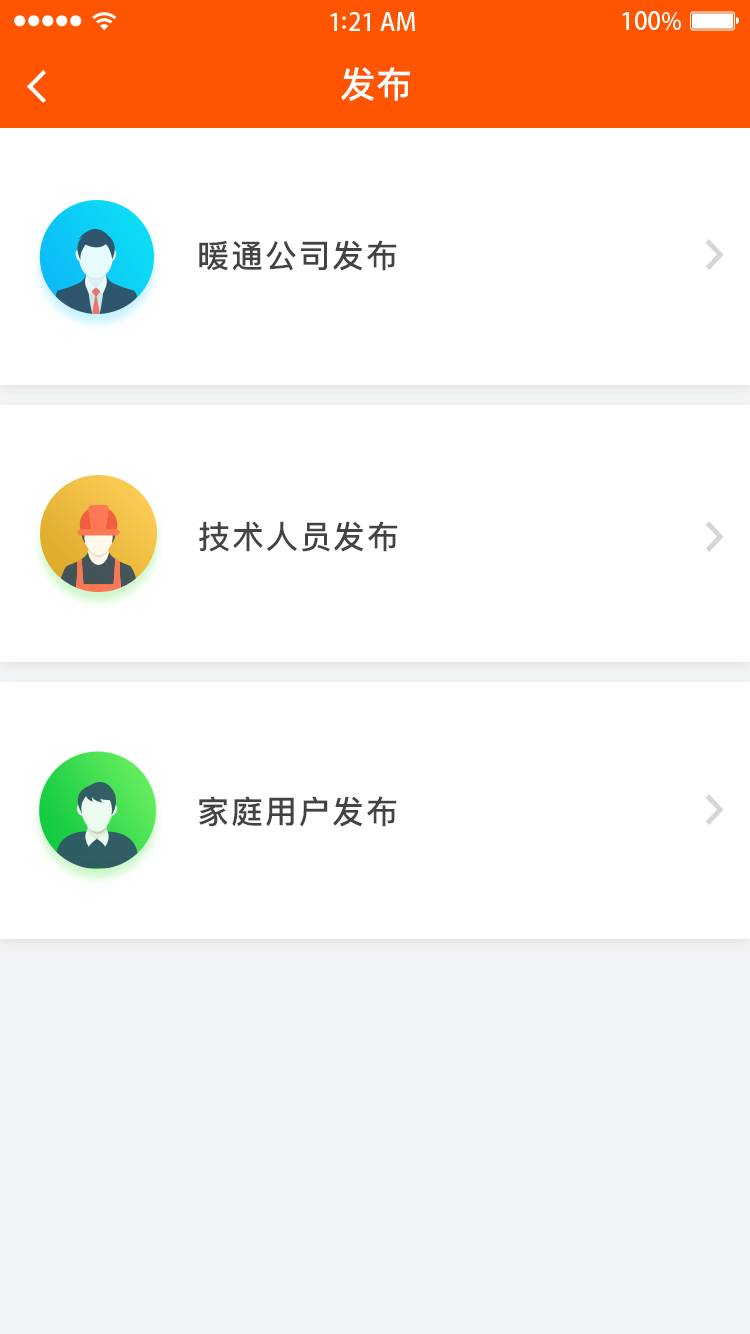
<style>
.page{position:relative;width:750px;height:1334px;background:#ffffff}
.page>*{position:absolute;margin:0}
.t1{font:36px "PingFangSC-Medium";color:#ffffff}
.t2{font:32px "PingFangSC-Medium";letter-spacing:0.06em;color:#434343}
</style>
<div class="page">
<p class="t1" style="left:341px;top:67px;width:69px;height:34px">发布</p>
<p class="t2" style="left:199px;top:240px;width:198px;height:31px">暖通公司发布</p>
<p class="t2" style="left:199px;top:521px;width:199px;height:31px">技术人员发布</p>
<p class="t2" style="left:199px;top:796px;width:198px;height:31px">家庭用户发布</p>
</div>
